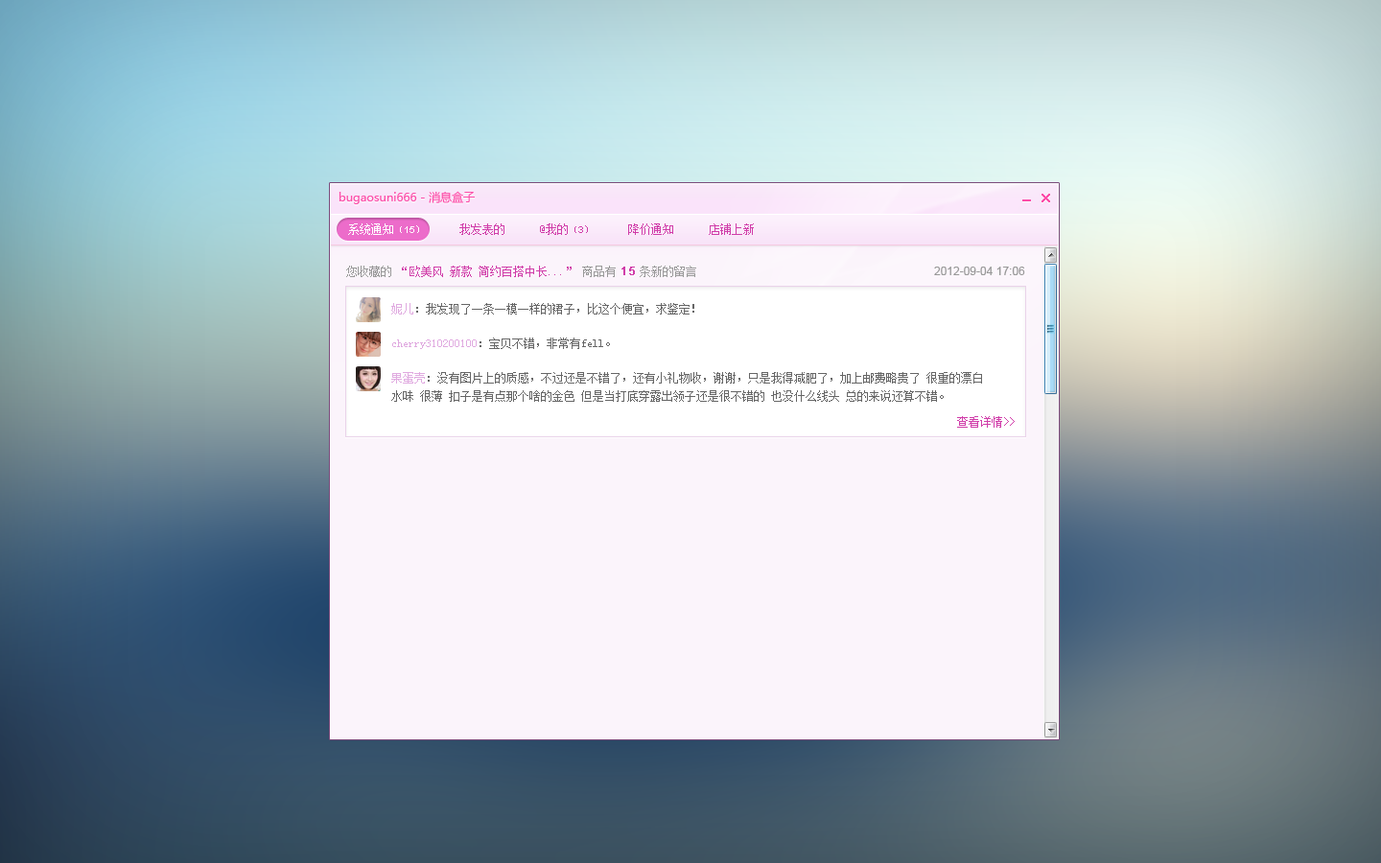
<style>
.page{position:relative;width:1381px;height:863px}
.page>*{position:absolute;margin:0}
.t1{font:11.5px "MicrosoftYaHei";color:#fc4ea9}
.t2{font:11.5px "SimSun";color:#d03da9}
.t3{font:11.5px "SimSun";color:#ffffff}
.t4{font:9.6px "SimSun";color:#ffffff}
.t5{font:9.6px "ArialMT";color:#ffffff}
.t6{font:9.6px "SimSun";color:#d03da9}
.t7{font:9.6px "ArialMT";color:#d03da9}
.t8{font:11.5px "SimSun";color:#999999}
.t9{font:11.5px "ArialMT";color:#d03da9;font-weight:bold}
.t10{font:11.5px "ArialMT";color:#999999}
.t11{font:11.5px/18.2px "SimSun";color:#666666}
.t12{font:11.5px/34.5px "SimSun";color:#e0aae0}
.t13{font:11.5px/34.5px "SimSun";color:#666666}
.t14{font:11.5px/18.2px "SimSun";color:#e0aae0}
</style>
<div class="page">
<p class="t1" style="left:339px;top:191px;width:136px;height:13px">bugaosuni666 - 消息盒子</p>
<p class="t2" style="left:348px;top:223px;width:406px;height:12px"><span class="t3">系统通知</span><span class="t4">（</span><span class="t5">15</span><span class="t4">）　　　</span>我发表的　　　@我的<span class="t6">（</span><span class="t7">3</span><span class="t6">）</span>　　　降价通知　　　店铺上新</p>
<p class="t2" style="left:346px;top:266px;width:350px;height:11px"><span class="t8">您收藏的 </span>“欧美风 新款 简约百搭中长...”<span class="t8"> 商品有 </span><span class="t9">15 </span><span class="t8">条新的留言</span></p>
<p class="t10" style="left:934px;top:267px;width:91px;height:8px">2012-09-04 17:06</p>
<p class="t11" style="left:391px;top:303px;width:591px;height:99px"><span class="t12">妮儿</span><span class="t13">：我发现了一条一模一样的裙子，比这个便宜，求鉴定！<br></span><span class="t12">cherry310200100</span><span class="t13">：宝贝不错，非常有fell。<br></span><span class="t14">果蛋壳</span>：没有图片上的质感，不过还是不错了，还有小礼物收，谢谢，只是我得减肥了，加上邮费略贵了 很重的漂白<br>水味 很薄 扣子是有点那个啥的金色 但是当打底穿露出领子还是很不错的 也没什么线头 总的来说还算不错。</p>
<p class="t2" style="left:957px;top:416px;width:58px;height:12px">查看详情&gt;&gt;</p>
</div>
